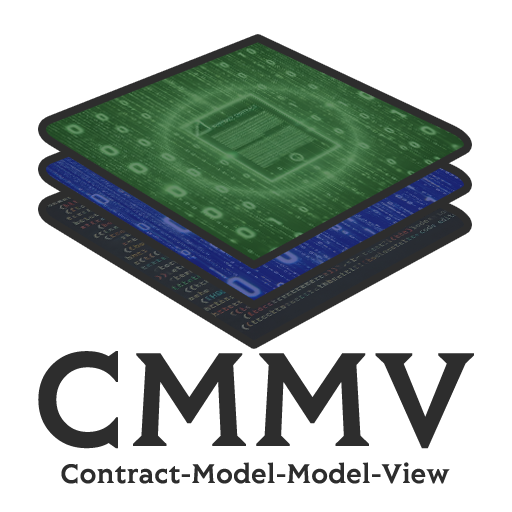
<style>
.page{position:relative;width:512px;height:512px;background:#ffffff}
.page>*{position:absolute;margin:0}
.t1{font:150px "Lovato-Demi";letter-spacing:-0.002em;color:#1e1e1e}
.t2{font:30px "Lovato-Demi";letter-spacing:-0.002em;color:#1e1e1e}
</style>
<div class="page">
<p class="t1" style="left:38px;top:351px;width:436px;height:98px">CMMV</p>
<p class="t2" style="left:61px;top:462px;width:389px;height:22px">Contract-Model-Model-View</p>
</div>
